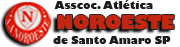
<style>
.page{position:relative;width:180px;height:47px;background:#ffffff}
.page>*{position:absolute;margin:0}
.t1{font:10px "GillSans-UltraBold";color:#1e1d1d}
.t2{font:18.6px "GillSans-UltraBold";color:#c42610}
.t3{font:10px "GillSans-UltraBold";color:#1d1d1d}
</style>
<div class="page">
<p class="t1" style="left:54px;top:0px;width:99px;height:9px">Asscoc. Atlética</p>
<p class="t2" style="left:57px;top:15px;width:117px;height:14px">NOROESTE</p>
<p class="t3" style="left:53px;top:36px;width:118px;height:8px">de Santo Amaro SP</p>
</div>
